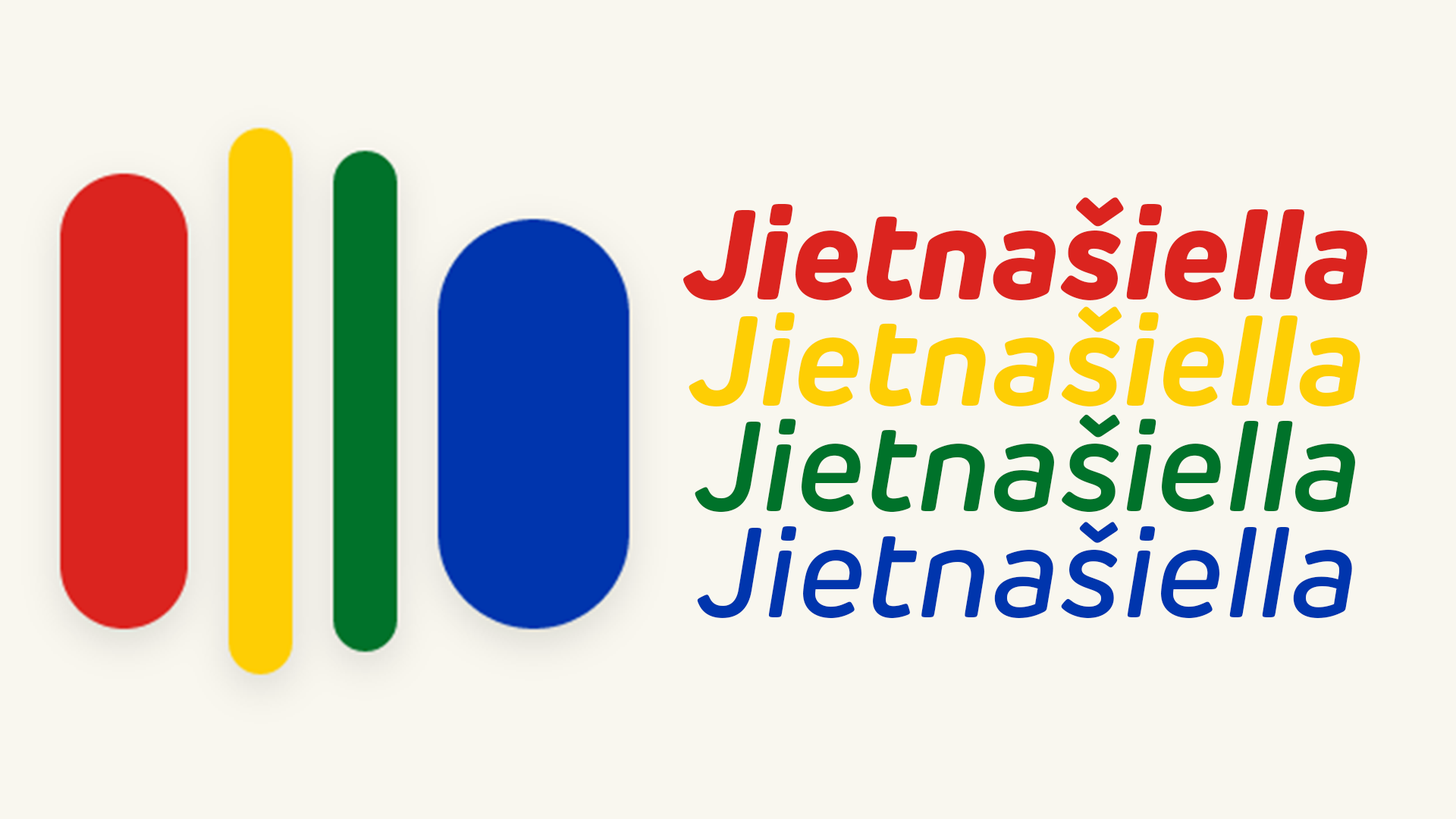
<style>
.page{position:relative;width:1456px;height:819px;background:#f9f7ef}
.page>*{position:absolute;margin:0}
.t1{font:126.4px "NewRubrikEdge-ExtraBoldItalic";color:#db241f}
.t2{font:126.4px "NewRubrikEdge-BoldItalic";color:#fece04}
.t3{font:126.4px "NewRubrikEdge-SemiBoldItalic";color:#00722a}
.t4{font:126.4px "NewRubrikEdge-MediumItalic";color:#0035ad}
</style>
<div class="page">
<p class="t1" style="left:683px;top:197px;width:684px;height:104px">Jietnašiella</p>
<p class="t2" style="left:689px;top:306px;width:671px;height:100px">Jietnašiella</p>
<p class="t3" style="left:695px;top:414px;width:660px;height:99px">Jietnašiella</p>
<p class="t4" style="left:697px;top:522px;width:655px;height:97px">Jietnašiella</p>
</div>
